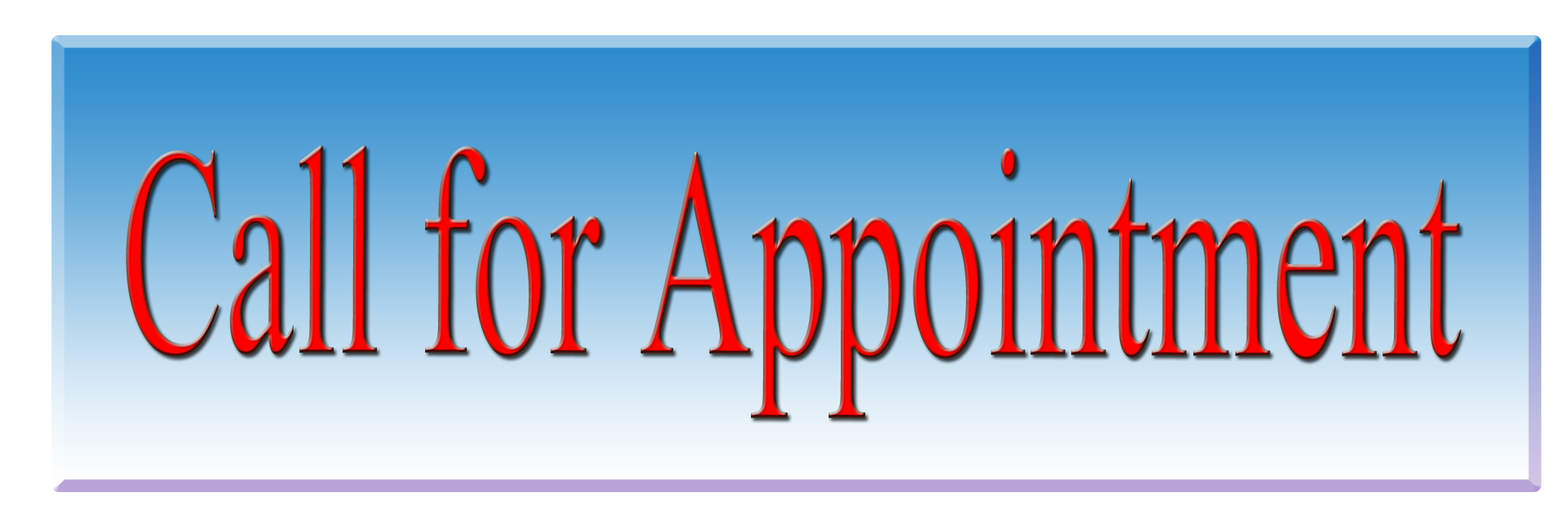
<style>
.page{position:relative;width:1568px;height:518px}
.page>*{position:absolute;margin:0}
.t1{font:369.7px "Aparajita";scale:0.52 1}
</style>
<div class="page">
<p class="t1" style="left:126px;top:145px;width:1336px;height:273px">Call for Appointment</p>
</div>
